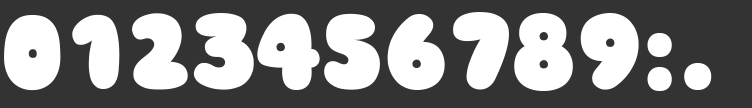
<style>
.page{position:relative;width:752px;height:108px;background:#333333}
.page>*{position:absolute;margin:0}
.t1{font:107.3px "Sniglet";color:#ffffff;font-variant:small-caps}
</style>
<div class="page">
<p class="t1" style="left:4px;top:15px;width:57px;height:76px">0</p>
<p class="t1" style="left:72px;top:14px;width:48px;height:75px">1</p>
<p class="t1" style="left:132px;top:13px;width:56px;height:77px">2</p>
<p class="t1" style="left:193px;top:13px;width:61px;height:77px">3</p>
<p class="t1" style="left:257px;top:13px;width:63px;height:77px">4</p>
<p class="t1" style="left:324px;top:12px;width:185px;height:78px">567</p>
<p class="t1" style="left:514px;top:13px;width:198px;height:78px">89:.</p>
</div>
